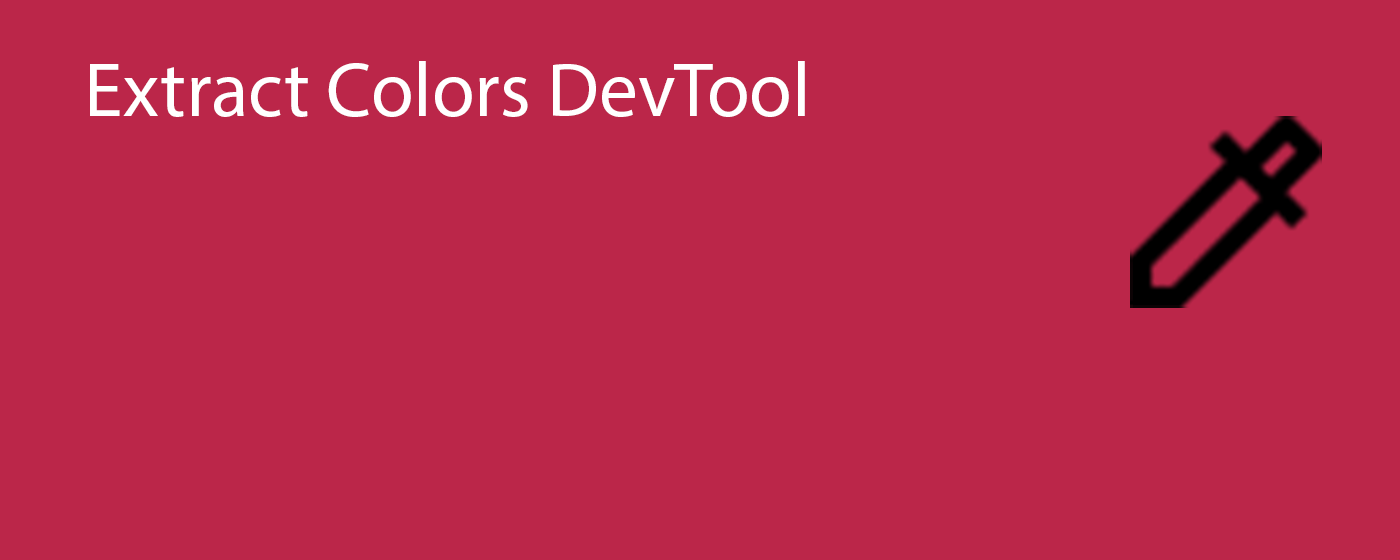
<style>
.page{position:relative;width:1400px;height:560px;background:#bb2649}
.page>*{position:absolute;margin:0}
.t1{font:77.9px "MyriadPro-Regular";color:#ffffff}
</style>
<div class="page">
<p class="t1" style="left:90px;top:61px;width:715px;height:56px">Extract Colors DevTool</p>
</div>
